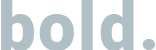
<style>
.page{position:relative;width:156px;height:50px;background:#ffffff}
.page>*{position:absolute;margin:0}
.t1{font:66.7px "Roboto-Black";letter-spacing:0.04em;color:#b0bec5}
</style>
<div class="page">
<p class="t1" style="left:1px;top:0px;width:154px;height:51px">bold.</p>
</div>
